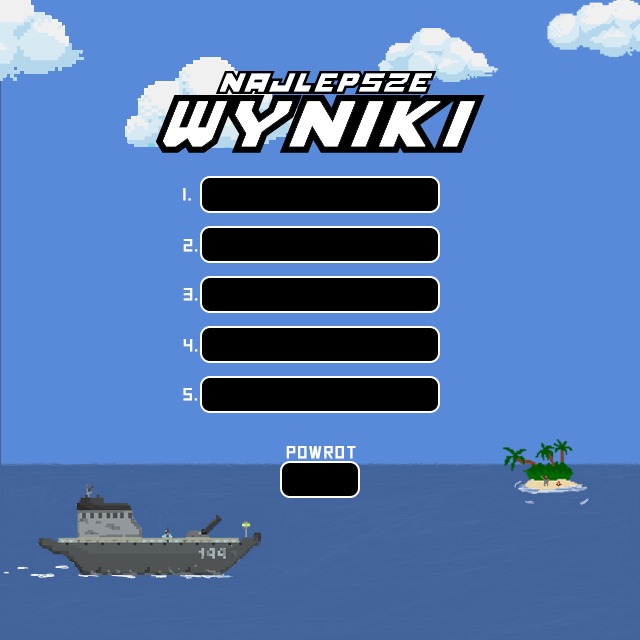
<style>
.page{position:relative;width:640px;height:640px;background:#5989d9}
.page>*{position:absolute;margin:0}
.t1{font:18px "SquareFont";letter-spacing:0.05em;color:#ffffff}
</style>
<div class="page">
<p class="t1" style="left:183px;top:188px;width:8px;height:13px">1.</p>
<p class="t1" style="left:183px;top:239px;width:15px;height:13px">2.</p>
<p class="t1" style="left:183px;top:288px;width:15px;height:13px">3.</p>
<p class="t1" style="left:183px;top:339px;width:15px;height:13px">4.</p>
<p class="t1" style="left:183px;top:388px;width:14px;height:13px">5.</p>
<p class="t1" style="left:286px;top:446px;width:70px;height:13px">powrot</p>
</div>
